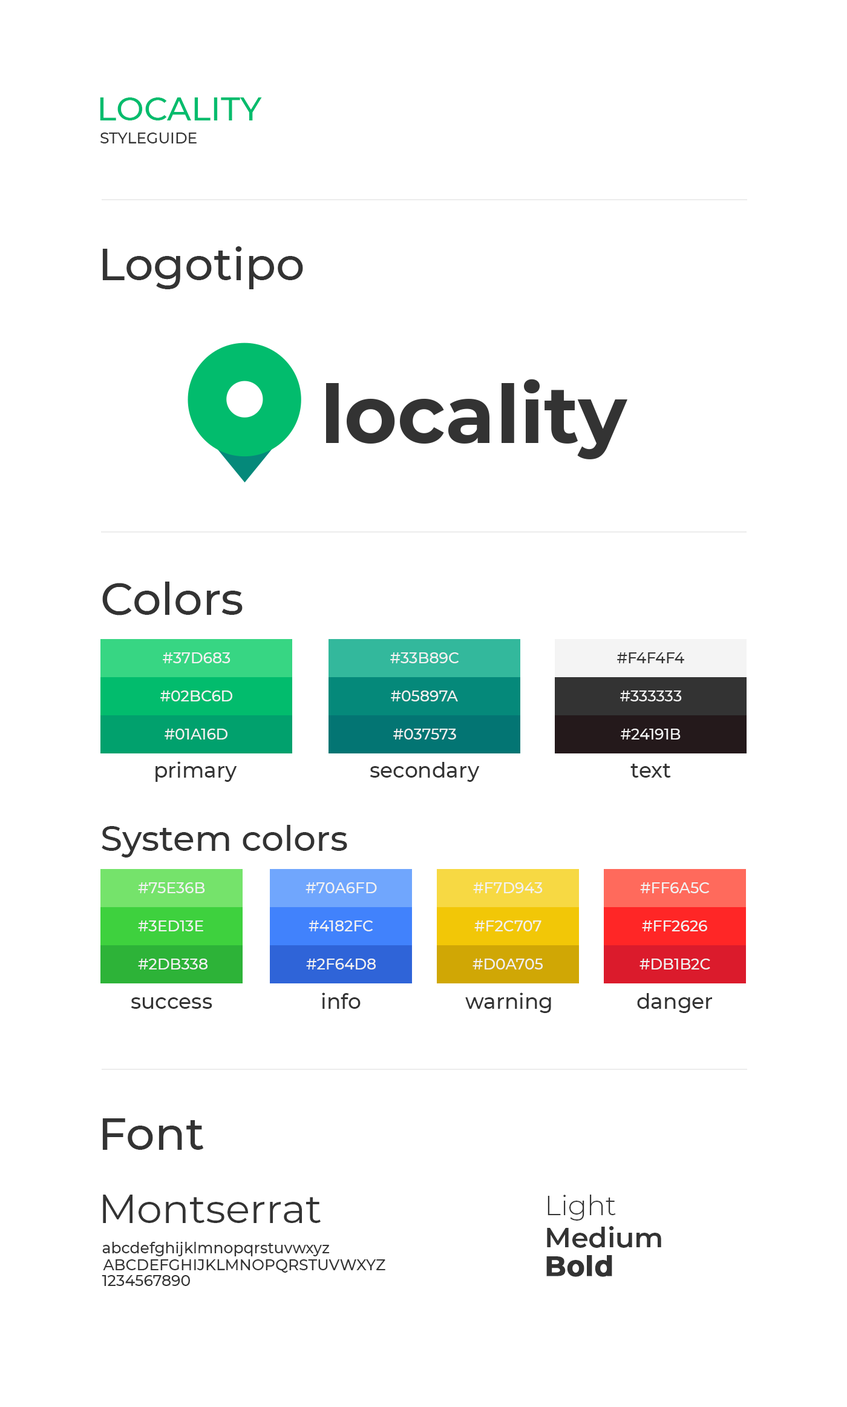
<style>
.page{position:relative;width:847px;height:1407px;background:#ffffff}
.page>*{position:absolute;margin:0}
.t1{font:33px "Montserrat-Medium";color:#02bc6d}
.t2{font:15.1px "Montserrat-Medium";color:#333333}
.t3{font:45.4px "Montserrat-Medium";color:#333333}
.t4{font:15.1px "Montserrat-Medium";color:#f2f2f2}
.t5{font:20.8px "Montserrat-Medium";color:#333333}
.t6{font:35.3px "Montserrat-Medium";color:#333333}
.t7{font:40.4px "Montserrat-Regular";color:#333333}
.t8{font:27.7px "Montserrat-Light";color:#333333}
.t9{font:27.7px "Montserrat-SemiBold";color:#333333}
.t10{font:15.1px "Montserrat-Medium";color:#333333;text-transform:uppercase}
.t11{font:27.7px "Montserrat-Bold";color:#333333;font-weight:bold}
</style>
<div class="page">
<p class="t1" style="left:100px;top:97px;width:162px;height:23px">LOCALITY</p>
<p class="t2" style="left:100px;top:133px;width:97px;height:10px">STYLEGUIDE</p>
<p class="t3" style="left:102px;top:246px;width:201px;height:43px">Logotipo</p>
<p class="t3" style="left:102px;top:582px;width:141px;height:34px">Colors</p>
<p class="t4" style="left:163px;top:652px;width:68px;height:11px">#37D683</p>
<p class="t4" style="left:390px;top:652px;width:69px;height:11px">#33B89C</p>
<p class="t2" style="left:617px;top:652px;width:68px;height:11px">#F4F4F4</p>
<p class="t4" style="left:160px;top:691px;width:72px;height:10px">#02BC6D</p>
<p class="t4" style="left:391px;top:691px;width:67px;height:10px">#05897A</p>
<p class="t4" style="left:620px;top:691px;width:62px;height:10px">#333333</p>
<p class="t4" style="left:165px;top:729px;width:63px;height:11px">#01A16D</p>
<p class="t4" style="left:393px;top:729px;width:63px;height:11px">#037573</p>
<p class="t4" style="left:621px;top:729px;width:60px;height:11px">#24191B</p>
<p class="t5" style="left:156px;top:761px;width:81px;height:21px">primary</p>
<p class="t5" style="left:370px;top:762px;width:110px;height:20px">secondary</p>
<p class="t5" style="left:631px;top:764px;width:40px;height:14px">text</p>
<p class="t6" style="left:102px;top:825px;width:245px;height:33px">System colors</p>
<p class="t4" style="left:138px;top:882px;width:67px;height:11px">#75E36B</p>
<p class="t4" style="left:306px;top:882px;width:71px;height:11px">#70A6FD</p>
<p class="t4" style="left:473px;top:882px;width:70px;height:11px">#F7D943</p>
<p class="t4" style="left:640px;top:882px;width:70px;height:11px">#FF6A5C</p>
<p class="t4" style="left:138px;top:921px;width:65px;height:10px">#3ED13E</p>
<p class="t4" style="left:309px;top:921px;width:64px;height:10px">#4182FC</p>
<p class="t4" style="left:475px;top:921px;width:67px;height:10px">#F2C707</p>
<p class="t4" style="left:642px;top:921px;width:66px;height:10px">#FF2626</p>
<p class="t4" style="left:138px;top:959px;width:70px;height:11px">#2DB338</p>
<p class="t4" style="left:306px;top:959px;width:70px;height:11px">#2F64D8</p>
<p class="t4" style="left:473px;top:959px;width:70px;height:11px">#D0A705</p>
<p class="t4" style="left:640px;top:959px;width:71px;height:11px">#DB1B2C</p>
<p class="t5" style="left:131px;top:997px;width:81px;height:12px">success</p>
<p class="t5" style="left:322px;top:993px;width:39px;height:16px">info</p>
<p class="t5" style="left:465px;top:993px;width:86px;height:20px">warning</p>
<p class="t5" style="left:637px;top:993px;width:75px;height:20px">danger</p>
<p class="t3" style="left:102px;top:1119px;width:102px;height:31px">Font</p>
<p class="t7" style="left:103px;top:1195px;width:218px;height:28px">Montserrat</p>
<p class="t8" style="left:548px;top:1195px;width:68px;height:26px">Light</p>
<p class="t9" style="left:547px;top:1226px;width:115px;height:22px">Medium</p>
<p class="t2" style="left:102px;top:1242px;width:228px;height:15px">abcdefghijklmnopqrstuvwxyz</p>
<p class="t10" style="left:103px;top:1260px;width:283px;height:13px">abcdefghijklmnopqrstuvwxyz</p>
<p class="t11" style="left:547px;top:1255px;width:66px;height:22px">Bold</p>
<p class="t2" style="left:102px;top:1275px;width:88px;height:11px">1234567890</p>
</div>
